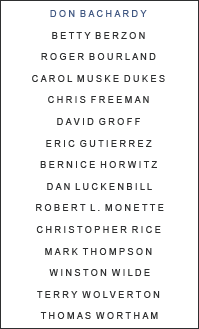
<style>
.page{position:relative;width:199px;height:329px;background:#ffffff}
.page>*{position:absolute;margin:0}
.t1{font:9px "ArialMT";color:#2e2f30}
.t2{font:9px "ArialMT";color:#405782}
</style>
<div class="page">
<p class="t1" style="left:32px;top:10px;width:133px;height:309px;text-align:center"><span class="t2">D O N  B A C H A R D Y</span> <br><br>B E T T Y  B E R Z O N <br><br>R O G E R  B O U R L A N D <br><br>C A R O L  M U S K E  D U K E S <br><br>C H R I S  F R E E M A N <br><br>D A V I D  G R O F F <br><br>E R I C  G U T I E R R E Z <br><br>B E R N I C E  H O R W I T Z <br><br>D A N  L U C K E N B I L L<br><br>R O B E R T  L .  M O N E T T E<br><br>C H R I S T O P H E R  R I C E <br><br>M A R K  T H O M P S O N <br><br>W I N S T O N  W I L D E<br><br>T E R R Y  W O L V E R T O N <br><br>T H O M A S  W O R T H A M</p>
</div>
